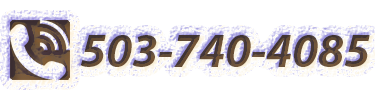
<style>
.page{position:relative;width:375px;height:100px;background:#ffffff}
.page>*{position:absolute;margin:0}
.t1{font:48px "MyriadPro-BoldIt"}
</style>
<div class="page">
<p class="t1" style="left:80px;top:35px;width:290px;height:32px">503-740-4085</p>
</div>
